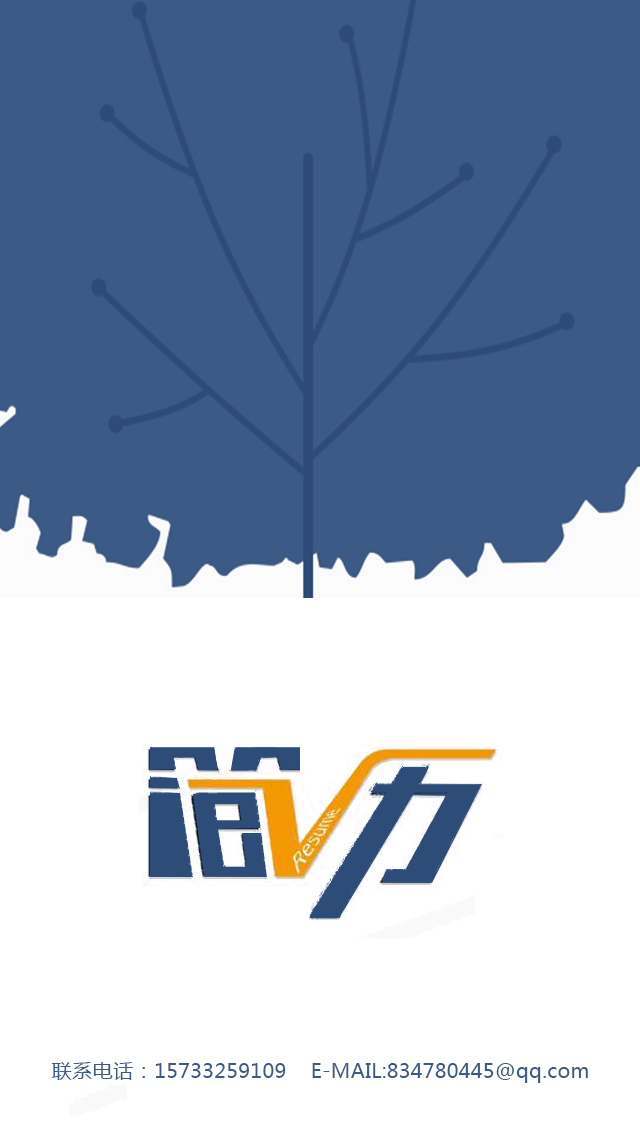
<style>
.page{position:relative;width:640px;height:1136px;background:#3b5a85}
.page>*{position:absolute;margin:0}
.t1{font:20.5px "MicrosoftYaHei";color:#3b5a85}
</style>
<div class="page">
<p class="t1" style="left:52px;top:1062px;width:536px;height:21px">联系电话：15733259109    E-MAIL:834780445@qq.com</p>
</div>
